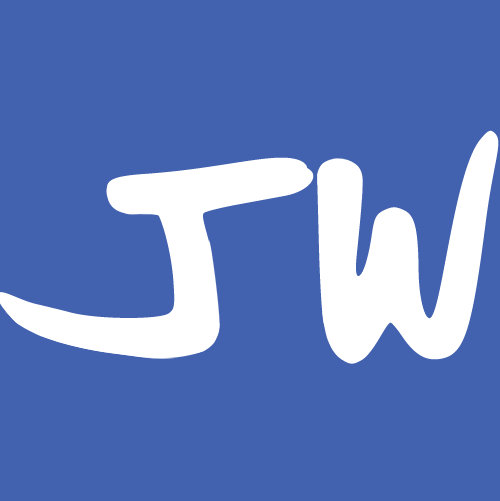
<style>
.page{position:relative;width:500px;height:501px;background:#4261af}
.page>*{position:absolute;margin:0}
.t1{font:421.1px "John_Walton_Print";letter-spacing:-0.01em;color:#ffffff}
</style>
<div class="page">
<p class="t1" style="left:3px;top:130px;width:496px;height:234px">JW</p>
</div>
